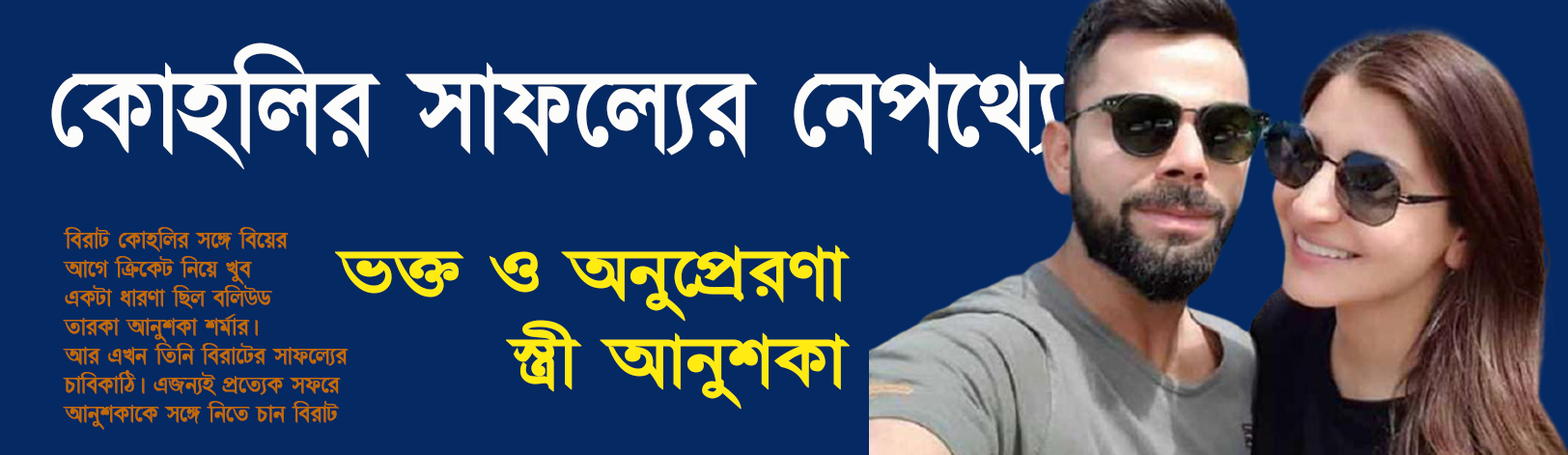
<style>
.page{position:relative;width:1568px;height:455px;background:#052962}
.page>*{position:absolute;margin:0}
.t1{font:142.1px "ChondanaMJ-Bold";color:#fcfcfa;font-weight:bold;scale:0.94 1}
.t2{font:29px/29px "ChondanaMJ";color:#c16a03;font-weight:bold}
.t3{font:86.2px/88.1px "ChondanaMJ-Bold";color:#ffeb11;font-weight:bold;scale:1.15 1}
</style>
<div class="page">
<p class="t1" style="left:51px;top:42px;width:1098px;height:128px">†Kvnwji mvd‡j¨i †bc‡_¨...</p>
<p class="t2" style="left:63px;top:227px;width:286px;height:203px">weivU †Kvnwji m‡½ we‡qi <br>Av‡M wµ‡KU wb‡q Lye <br>GKUv aviYv wQj ewjDW <br>ZviKv AvbykKv kg©vi|<br>Avi GLb wZwb weiv‡Ui mvd‡j¨i<br>PvweKvwV| GRb¨B cÖ‡Z¨K md‡i<br>AvbykKv‡K m‡½ wb‡Z Pvb weivU</p>
<p class="t3" style="left:334px;top:244px;width:516px;height:165px;text-align:right">f³ I Aby‡cÖiYv<br>¯¿x AvbykKv</p>
</div>
